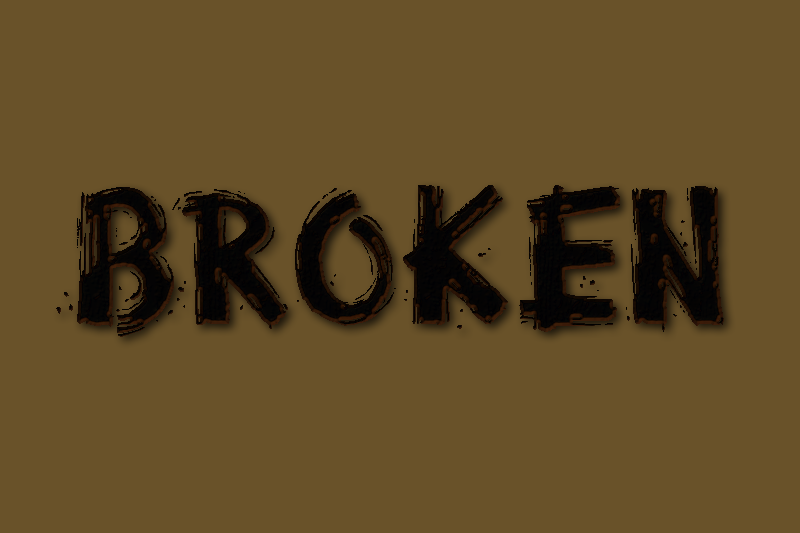
<style>
.page{position:relative;width:800px;height:533px;background:#695229}
.page>*{position:absolute;margin:0}
.t1{font:200px "BrokenStick";color:#050505}
</style>
<div class="page">
<p class="t1" style="left:56px;top:185px;width:668px;height:152px">Broken</p>
</div>
